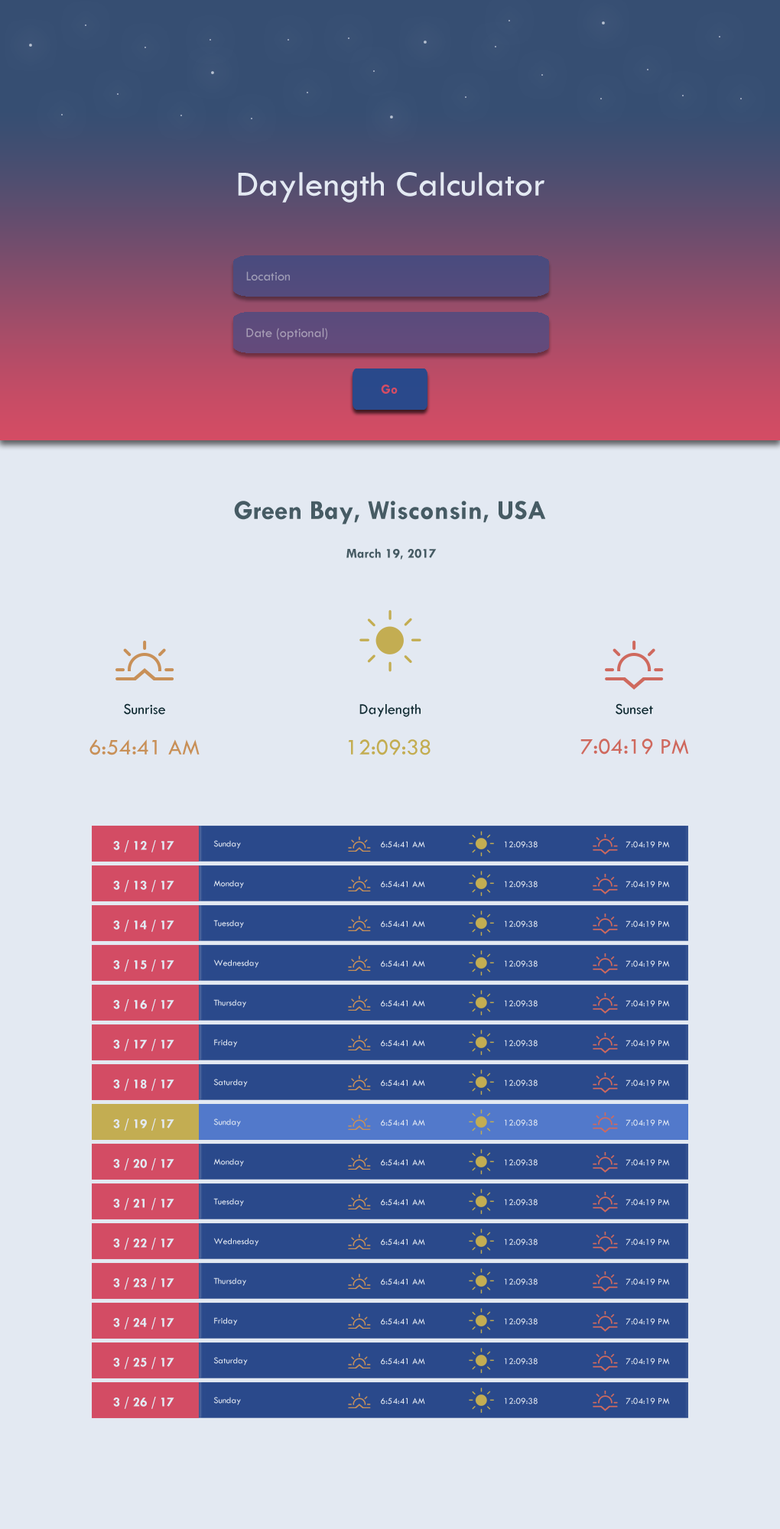
<style>
.page{position:relative;width:780px;height:1529px;background:#e3e9f2}
.page>*{position:absolute;margin:0}
.t1{font:36.7px "TwCenMT-Regular";color:#e3e9f2}
.t2{font:13.8px "TwCenMT-Regular";color:#9f9db6}
.t3{font:13.8px "TwCenMT-Regular";color:#a79db5}
.t4{font:13.8px "TwCenMT-Bold";color:#d44c64}
.t5{font:27.5px "TwCenMT-Bold";color:#465b64}
.t6{font:13.8px "TwCenMT-Bold";color:#465b64}
.t7{font:15.3px "TwCenMT-Regular";color:#122c34}
.t8{font:22.9px "TwCenMT-Regular";color:#c89058}
.t9{font:22.9px "TwCenMT-Regular";color:#c3ad52}
.t10{font:22.9px "TwCenMT-Regular";color:#cf695e}
.t11{font:13.8px "TwCenMT-Bold";color:#e3e9f2}
.t12{font:9.2px "TwCenMT-Regular";color:#e3e9f2}
</style>
<div class="page">
<p class="t1" style="left:238px;top:172px;width:306px;height:31px">Daylength Calculator</p>
<p class="t2" style="left:246px;top:271px;width:44px;height:10px">Location</p>
<p class="t3" style="left:246px;top:328px;width:81px;height:12px">Date (optional)</p>
<p class="t4" style="left:381px;top:385px;width:17px;height:9px">Go</p>
<p class="t5" style="left:234px;top:501px;width:312px;height:23px">Green Bay, Wisconsin, USA</p>
<p class="t6" style="left:346px;top:548px;width:91px;height:12px">March 19, 2017</p>
<p class="t7" style="left:124px;top:703px;width:41px;height:12px">Sunrise</p>
<p class="t7" style="left:359px;top:704px;width:61px;height:13px">Daylength</p>
<p class="t7" style="left:615px;top:703px;width:38px;height:12px">Sunset</p>
<p class="t8" style="left:89px;top:739px;width:111px;height:16px">6:54:41 AM</p>
<p class="t9" style="left:348px;top:739px;width:82px;height:16px">12:09:38</p>
<p class="t10" style="left:580px;top:739px;width:109px;height:16px">7:04:19 PM</p>
<p class="t11" style="left:113px;top:840px;width:61px;height:12px">3 / 12 / 17</p>
<p class="t12" style="left:213px;top:840px;width:28px;height:9px">Sunday</p>
<p class="t12" style="left:381px;top:841px;width:44px;height:7px">6:54:41 AM</p>
<p class="t12" style="left:505px;top:841px;width:32px;height:7px">12:09:38</p>
<p class="t12" style="left:625px;top:841px;width:45px;height:7px">7:04:19 PM</p>
<p class="t11" style="left:113px;top:880px;width:61px;height:12px">3 / 13 / 17</p>
<p class="t12" style="left:213px;top:880px;width:31px;height:8px">Monday</p>
<p class="t12" style="left:381px;top:881px;width:44px;height:7px">6:54:41 AM</p>
<p class="t12" style="left:505px;top:881px;width:32px;height:7px">12:09:38</p>
<p class="t12" style="left:625px;top:881px;width:45px;height:7px">7:04:19 PM</p>
<p class="t11" style="left:113px;top:920px;width:61px;height:12px">3 / 14 / 17</p>
<p class="t12" style="left:213px;top:920px;width:31px;height:8px">Tuesday</p>
<p class="t12" style="left:381px;top:921px;width:44px;height:6px">6:54:41 AM</p>
<p class="t12" style="left:505px;top:921px;width:32px;height:6px">12:09:38</p>
<p class="t12" style="left:625px;top:921px;width:45px;height:6px">7:04:19 PM</p>
<p class="t11" style="left:113px;top:960px;width:61px;height:12px">3 / 15 / 17</p>
<p class="t12" style="left:213px;top:960px;width:46px;height:8px">Wednesday</p>
<p class="t12" style="left:381px;top:960px;width:44px;height:7px">6:54:41 AM</p>
<p class="t12" style="left:505px;top:960px;width:32px;height:7px">12:09:38</p>
<p class="t12" style="left:625px;top:960px;width:45px;height:7px">7:04:19 PM</p>
<p class="t11" style="left:113px;top:999px;width:61px;height:12px">3 / 16 / 17</p>
<p class="t12" style="left:213px;top:999px;width:33px;height:9px">Thursday</p>
<p class="t12" style="left:381px;top:1000px;width:44px;height:7px">6:54:41 AM</p>
<p class="t12" style="left:505px;top:1000px;width:32px;height:7px">12:09:38</p>
<p class="t12" style="left:625px;top:1000px;width:45px;height:7px">7:04:19 PM</p>
<p class="t11" style="left:113px;top:1039px;width:61px;height:12px">3 / 17 / 17</p>
<p class="t12" style="left:214px;top:1039px;width:24px;height:8px">Friday</p>
<p class="t12" style="left:381px;top:1040px;width:44px;height:7px">6:54:41 AM</p>
<p class="t12" style="left:505px;top:1040px;width:32px;height:7px">12:09:38</p>
<p class="t12" style="left:625px;top:1040px;width:45px;height:7px">7:04:19 PM</p>
<p class="t11" style="left:113px;top:1079px;width:61px;height:12px">3 / 18 / 17</p>
<p class="t12" style="left:213px;top:1079px;width:35px;height:8px">Saturday</p>
<p class="t12" style="left:381px;top:1080px;width:44px;height:6px">6:54:41 AM</p>
<p class="t12" style="left:505px;top:1080px;width:32px;height:6px">12:09:38</p>
<p class="t12" style="left:625px;top:1080px;width:45px;height:6px">7:04:19 PM</p>
<p class="t11" style="left:113px;top:1119px;width:61px;height:12px">3 / 19 / 17</p>
<p class="t12" style="left:213px;top:1119px;width:28px;height:8px">Sunday</p>
<p class="t12" style="left:381px;top:1119px;width:44px;height:7px">6:54:41 AM</p>
<p class="t12" style="left:505px;top:1119px;width:32px;height:7px">12:09:38</p>
<p class="t12" style="left:625px;top:1119px;width:45px;height:7px">7:04:19 PM</p>
<p class="t11" style="left:113px;top:1158px;width:61px;height:13px">3 / 20 / 17</p>
<p class="t12" style="left:213px;top:1158px;width:31px;height:9px">Monday</p>
<p class="t12" style="left:381px;top:1159px;width:44px;height:7px">6:54:41 AM</p>
<p class="t12" style="left:505px;top:1159px;width:32px;height:7px">12:09:38</p>
<p class="t12" style="left:625px;top:1159px;width:45px;height:7px">7:04:19 PM</p>
<p class="t11" style="left:113px;top:1198px;width:61px;height:12px">3 / 21 / 17</p>
<p class="t12" style="left:213px;top:1198px;width:31px;height:8px">Tuesday</p>
<p class="t12" style="left:381px;top:1199px;width:44px;height:7px">6:54:41 AM</p>
<p class="t12" style="left:505px;top:1199px;width:32px;height:7px">12:09:38</p>
<p class="t12" style="left:625px;top:1199px;width:45px;height:7px">7:04:19 PM</p>
<p class="t11" style="left:113px;top:1238px;width:61px;height:12px">3 / 22 / 17</p>
<p class="t12" style="left:213px;top:1238px;width:46px;height:8px">Wednesday</p>
<p class="t12" style="left:381px;top:1239px;width:44px;height:6px">6:54:41 AM</p>
<p class="t12" style="left:505px;top:1239px;width:32px;height:6px">12:09:38</p>
<p class="t12" style="left:625px;top:1239px;width:45px;height:6px">7:04:19 PM</p>
<p class="t11" style="left:113px;top:1278px;width:61px;height:12px">3 / 23 / 17</p>
<p class="t12" style="left:213px;top:1278px;width:33px;height:8px">Thursday</p>
<p class="t12" style="left:381px;top:1278px;width:44px;height:7px">6:54:41 AM</p>
<p class="t12" style="left:505px;top:1278px;width:32px;height:7px">12:09:38</p>
<p class="t12" style="left:625px;top:1278px;width:45px;height:7px">7:04:19 PM</p>
<p class="t11" style="left:113px;top:1317px;width:61px;height:13px">3 / 24 / 17</p>
<p class="t12" style="left:214px;top:1317px;width:24px;height:9px">Friday</p>
<p class="t12" style="left:381px;top:1318px;width:44px;height:7px">6:54:41 AM</p>
<p class="t12" style="left:505px;top:1318px;width:32px;height:7px">12:09:38</p>
<p class="t12" style="left:625px;top:1318px;width:45px;height:7px">7:04:19 PM</p>
<p class="t11" style="left:113px;top:1357px;width:61px;height:12px">3 / 25 / 17</p>
<p class="t12" style="left:213px;top:1357px;width:35px;height:8px">Saturday</p>
<p class="t12" style="left:381px;top:1358px;width:44px;height:7px">6:54:41 AM</p>
<p class="t12" style="left:505px;top:1358px;width:32px;height:7px">12:09:38</p>
<p class="t12" style="left:625px;top:1358px;width:45px;height:7px">7:04:19 PM</p>
<p class="t11" style="left:113px;top:1397px;width:61px;height:12px">3 / 26 / 17</p>
<p class="t12" style="left:213px;top:1397px;width:28px;height:8px">Sunday</p>
<p class="t12" style="left:381px;top:1398px;width:44px;height:6px">6:54:41 AM</p>
<p class="t12" style="left:505px;top:1398px;width:32px;height:6px">12:09:38</p>
<p class="t12" style="left:625px;top:1398px;width:45px;height:6px">7:04:19 PM</p>
</div>
